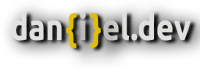
<style>
.page{position:relative;width:200px;height:70px}
.page>*{position:absolute;margin:0}
.t1{font:36.2px "Ubuntu-Bold";color:#e0e0df;scale:0.85 1}
</style>
<div class="page">
<p class="t1" style="left:11px;top:12px;width:180px;height:29px">dan  i  el.dev</p>
</div>
